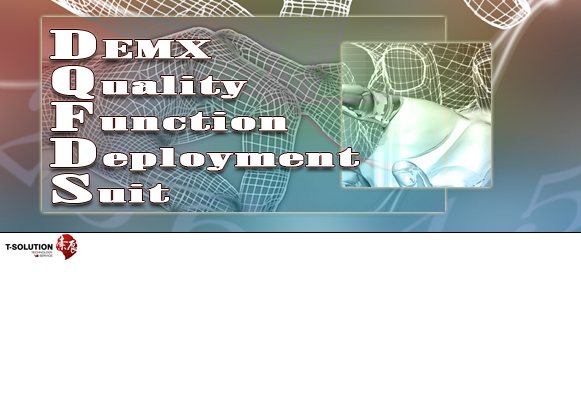
<style>
.page{position:relative;width:581px;height:400px;background:#ffffff}
.page>*{position:absolute;margin:0}
.t1{font:24px/36px "BodoniMTPosterCompressed";color:#ffffff;font-weight:bold;scale:4 1}
.t2{font:36px/36px "BodoniMTPosterCompressed";color:#ffffff;font-weight:bold;scale:4 1}
</style>
<div class="page">
<p class="t1" style="left:50px;top:30px;width:309px;height:173px"><span class="t2">D</span>EMX<br><span class="t2">Q</span>uality<br><span class="t2">F</span>unction<br><span class="t2">D</span>eployment<br><span class="t2">S</span>uit</p>
</div>
